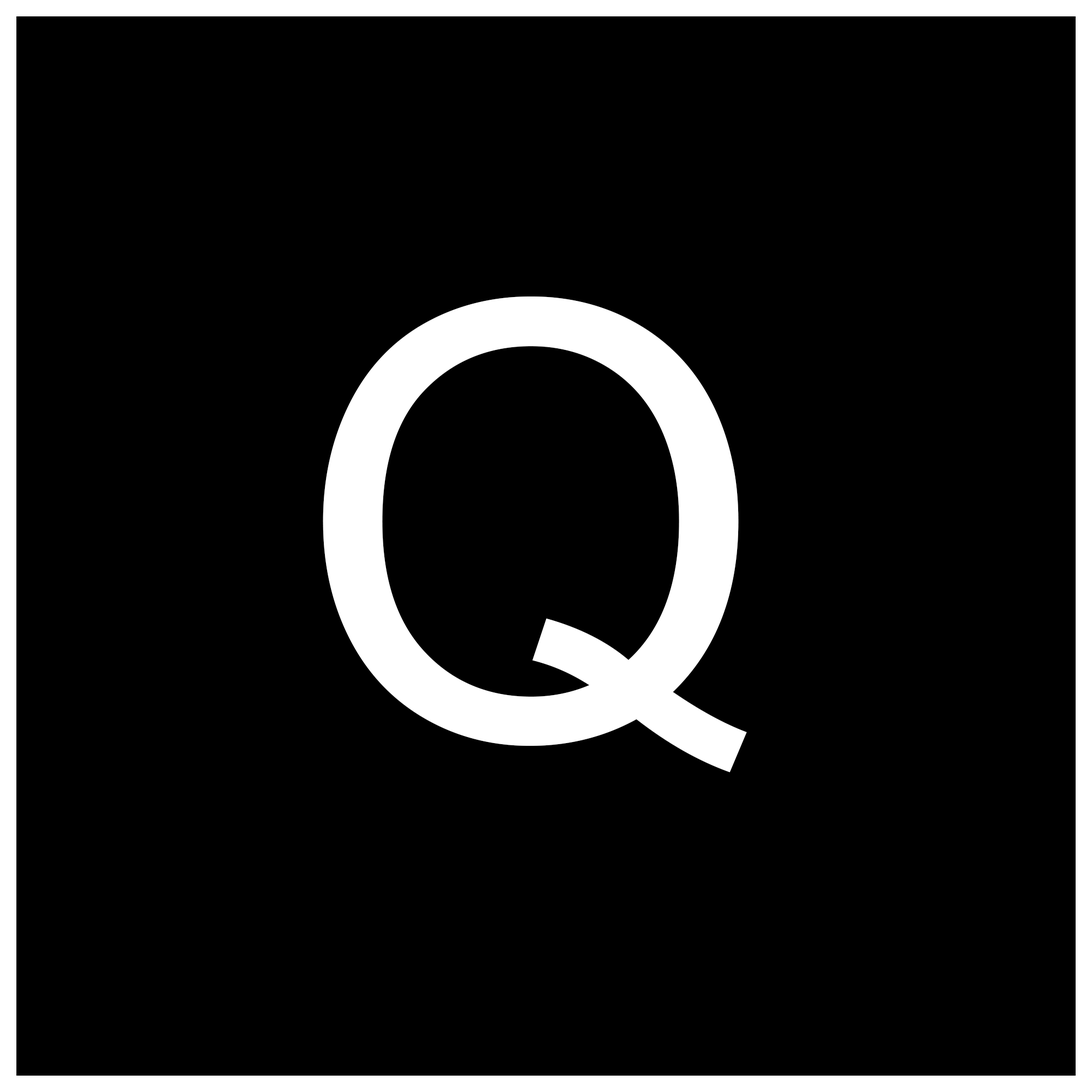
<style>
.page{position:relative;width:1092px;height:1092px;background:#000000}
.page>*{position:absolute;margin:0}
.t1{font:606.7px "ArialMT";color:#ffffff}
</style>
<div class="page">
<p class="t1" style="left:323px;top:296px;width:424px;height:477px">Q</p>
</div>
